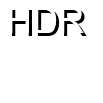
<style>
.page{position:relative;width:103px;height:103px;background:#ffffff}
.page>*{position:absolute;margin:0}
.t1{font:36px "ArialMT";color:#ffffff}
.t2{font:36px "ArialMT";color:#000000}
</style>
<div class="page">
<p class="t1" style="left:9px;top:7px;width:75px;height:26px">HDR</p>
<p class="t2" style="left:12px;top:10px;width:75px;height:26px">HDR</p>
</div>
